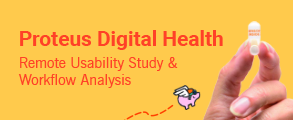
<style>
.page{position:relative;width:293px;height:120px;background:#ffca4c}
.page>*{position:absolute;margin:0}
.t1{font:20.8px "Roboto-Bold";color:#ff4127}
.t2{font:14.6px "NewsGothicBT-Roman";color:#ff4127}
</style>
<div class="page">
<p class="t1" style="left:20px;top:30px;width:203px;height:20px">Proteus Digital Health</p>
<p class="t2" style="left:18px;top:57px;width:160px;height:31px">Remote Usability Study &amp;<br>Workflow Analysis</p>
</div>
